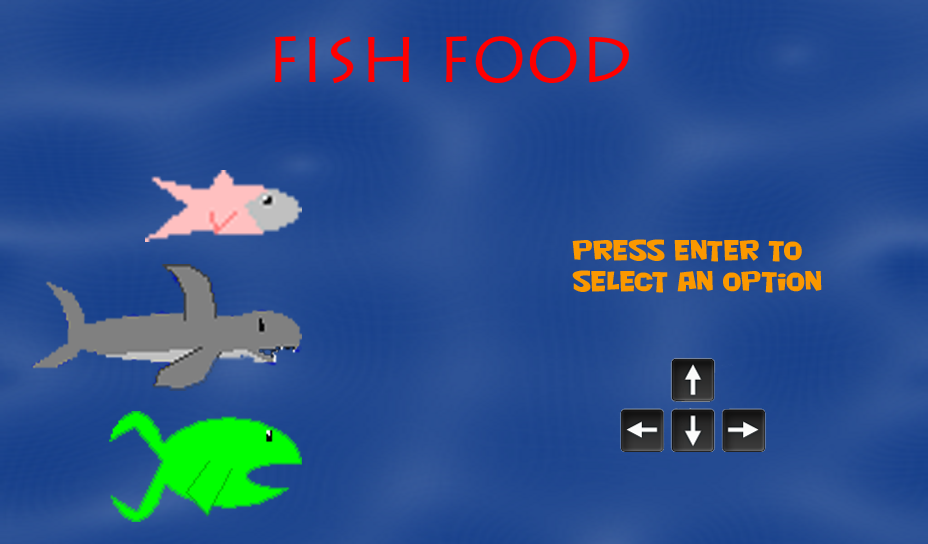
<style>
.page{position:relative;width:928px;height:544px}
.page>*{position:absolute;margin:0}
.t1{font:26px "NightclubBTN";color:#fa9800;font-weight:bold}
</style>
<div class="page">
<p class="t1" style="left:572px;top:239px;width:250px;height:54px">Press Enter to <br>select an option</p>
</div>
